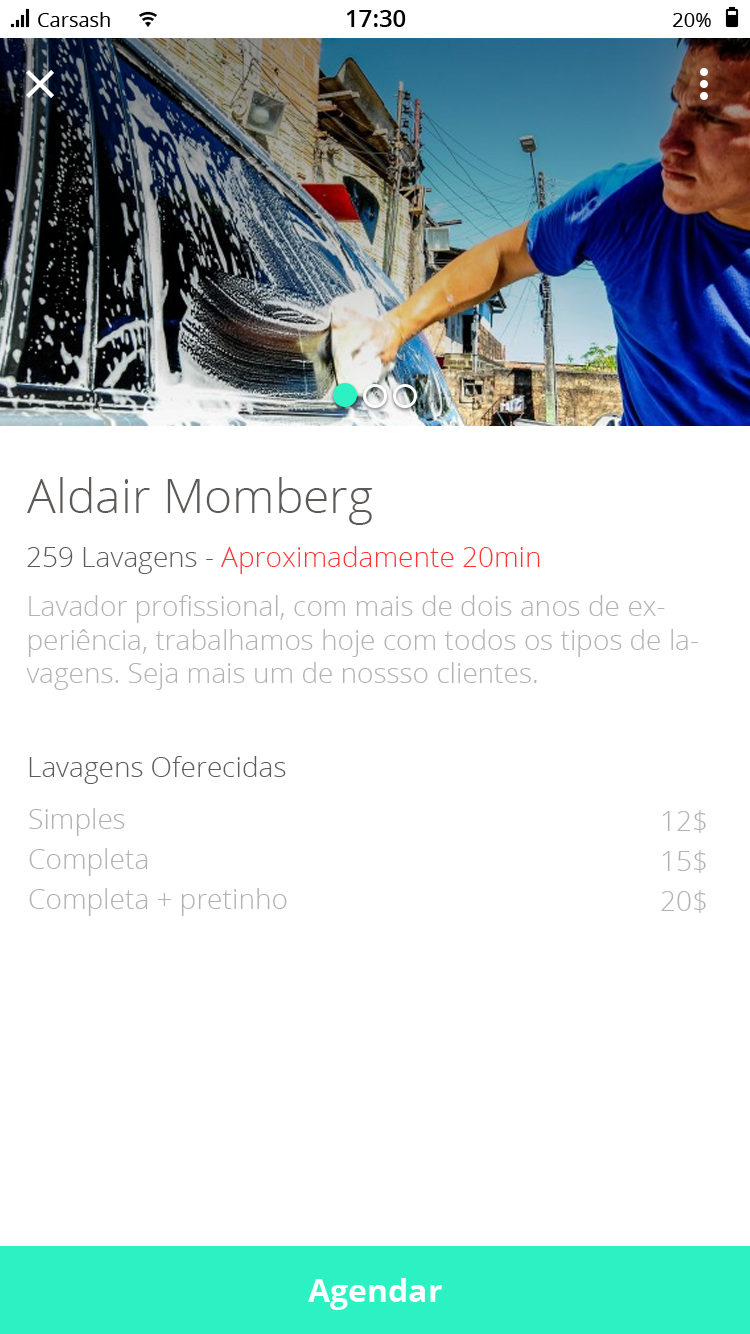
<style>
.page{position:relative;width:750px;height:1334px;background:#ffffff}
.page>*{position:absolute;margin:0}
.t1{font:48px "OpenSans-Light";color:#5d5a58}
.t2{font:28px "OpenSans-Light";color:#ff3535}
.t3{font:28px "OpenSans-Light";color:#5d5a58}
.t4{font:28px "OpenSans-Light";color:#5d5d5d}
.t5{font:28px "OpenSans-Light";color:#b4b3b3}
.t6{font:28px "OpenSans-Light";color:#b3b2b1}
</style>
<div class="page">
<p class="t1" style="left:27px;top:477px;width:346px;height:48px">Aldair Momberg</p>
<p class="t2" style="left:27px;top:546px;width:513px;height:28px"><span class="t3">259 </span><span class="t4">Lavagens - </span>Aproximadamente 20min</p>
<p class="t5" style="left:26px;top:595px;width:672px;height:95px">Lavador profissional, com mais de dois anos de experiência, trabalhamos hoje com todos os tipos de lavagens. Seja mais um de nossso clientes.</p>
<p class="t3" style="left:29px;top:756px;width:257px;height:28px">Lavagens Oferecidas</p>
<p class="t6" style="left:29px;top:808px;width:96px;height:28px">Simples</p>
<p class="t6" style="left:662px;top:810px;width:44px;height:23px">12$</p>
<p class="t6" style="left:29px;top:848px;width:119px;height:28px">Completa</p>
<p class="t6" style="left:662px;top:850px;width:44px;height:23px">15$</p>
<p class="t6" style="left:29px;top:888px;width:258px;height:28px">Completa + pretinho</p>
<p class="t6" style="left:661px;top:890px;width:45px;height:23px">20$</p>
</div>
